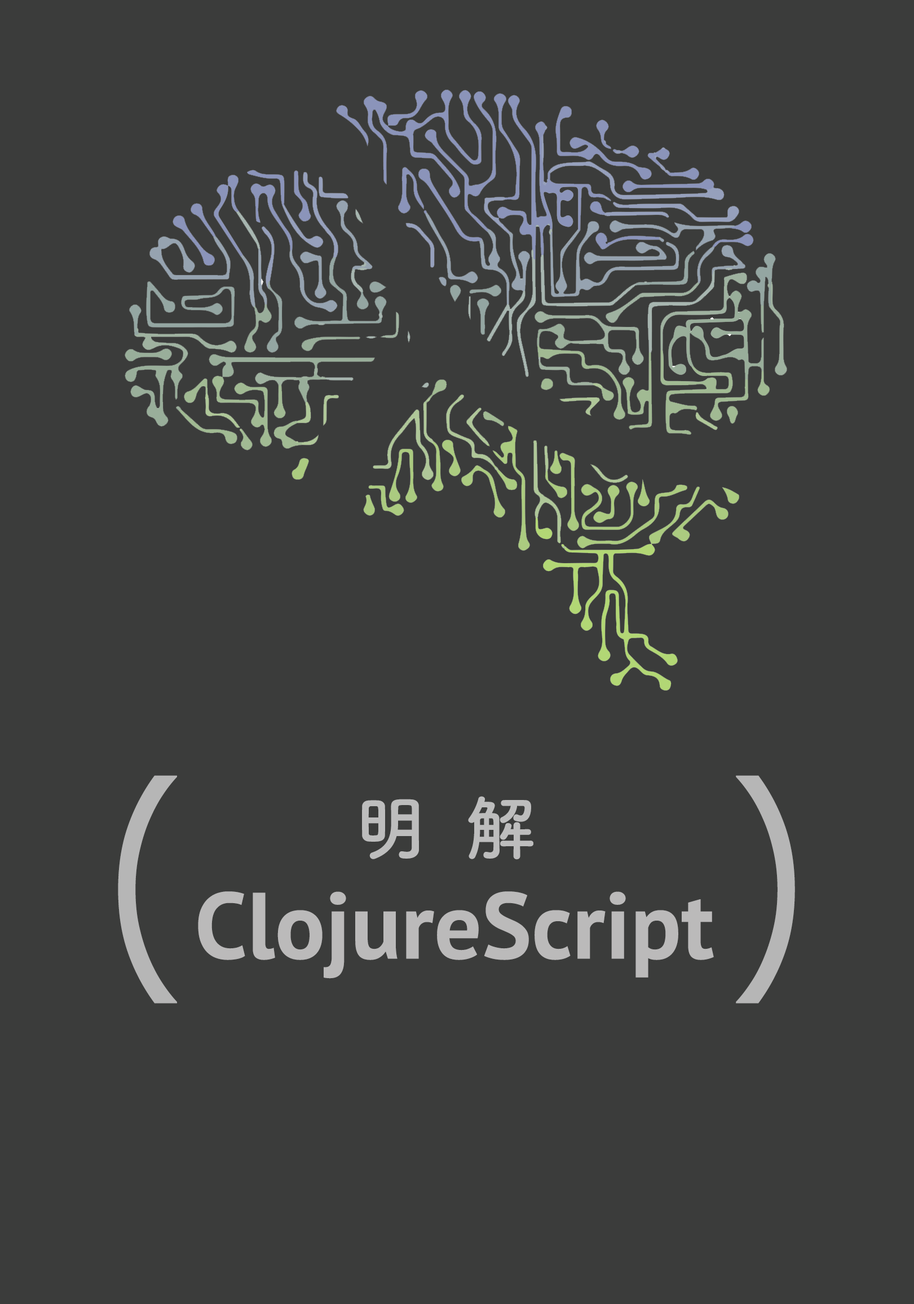
<style>
.page{position:relative;width:914px;height:1304px;background:#3b3c3b}
.page>*{position:absolute;margin:0}
.t1{font:236.7px "Verdana";color:#b6b6b6;scale:0.84 1}
.t2{font:70.5px "TsukuARdGothic-Bold";color:#bdbdbd}
.t3{font:94px "PTSans-Bold";color:#bbbaba}
</style>
<div class="page">
<p class="t1" style="left:118px;top:775px;width:677px;height:229px">(        )</p>
<p class="t2" style="left:362px;top:796px;width:171px;height:64px">明  解</p>
<p class="t3" style="left:198px;top:892px;width:516px;height:87px">ClojureScript</p>
</div>
